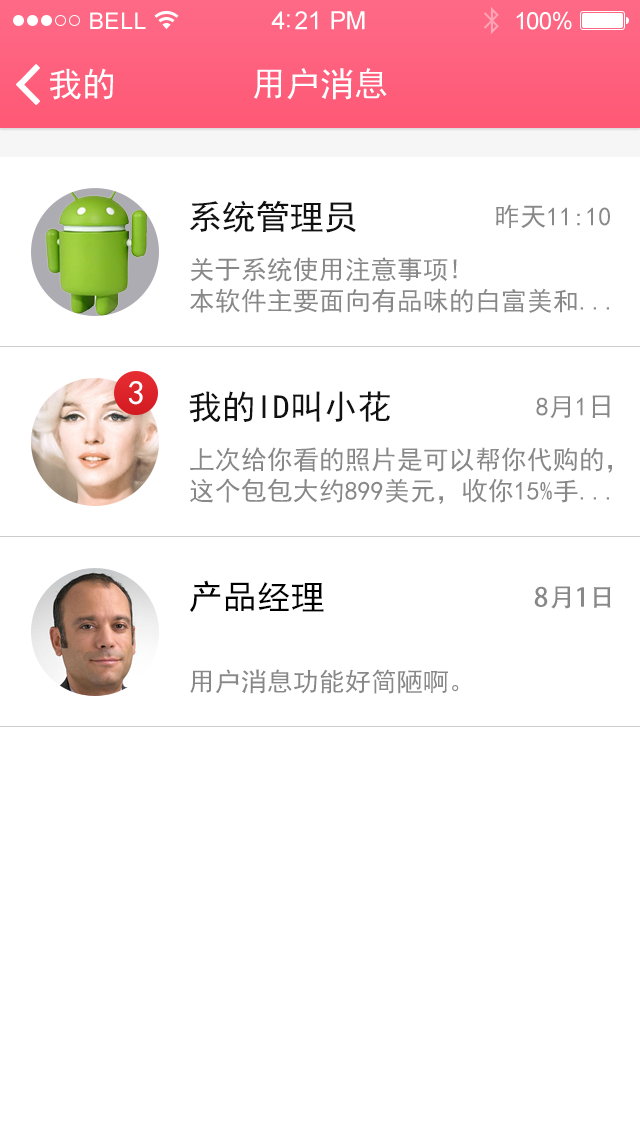
<style>
.page{position:relative;width:640px;height:1136px;background:#ffffff}
.page>*{position:absolute;margin:0}
.t1{font:34px "SimHei";color:#111111}
.t2{font:26px "SimHei";color:#888888}
.t3{font:34px "SimHei";color:#ffffff}
.t4{font:34px "SimHei";color:#000000}
.t5{font:26px "AdobeHeitiStd-Regular";color:#888888}
</style>
<div class="page">
<p class="t1" style="left:189px;top:200px;width:167px;height:33px">系统管理员</p>
<p class="t2" style="left:496px;top:204px;width:114px;height:24px">昨天11:10</p>
<p class="t2" style="left:190px;top:257px;width:419px;height:56px">关于系统使用注意事项!<br>本软件主要面向有品味的白富美和...</p>
<p class="t3" style="left:128px;top:381px;width:15px;height:24px">3</p>
<p class="t1" style="left:189px;top:391px;width:201px;height:32px">我的ID叫小花</p>
<p class="t2" style="left:536px;top:395px;width:74px;height:23px">8月1日</p>
<p class="t2" style="left:190px;top:447px;width:422px;height:57px">上次给你看的照片是可以帮你代购的，<br>这个包包大约899美元，收你15%手...</p>
<p class="t4" style="left:190px;top:580px;width:134px;height:32px">产品经理</p>
<p class="t5" style="left:534px;top:586px;width:77px;height:23px">8月1日</p>
<p class="t2" style="left:190px;top:669px;width:269px;height:25px">用户消息功能好简陋啊。</p>
</div>
